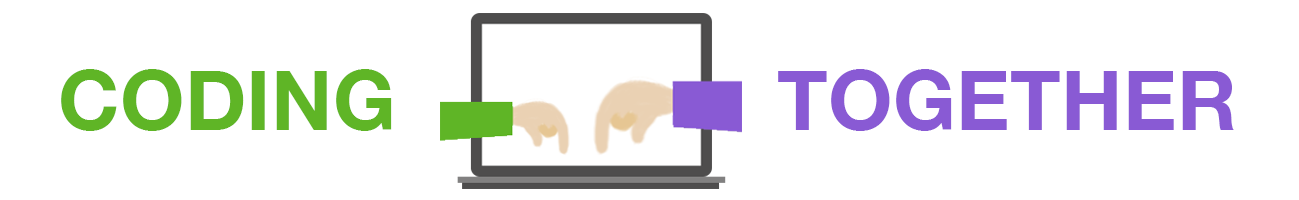
<style>
.page{position:relative;width:1299px;height:200px;background:#ffffff}
.page>*{position:absolute;margin:0}
.t1{font:83.3px "HelveticaNeue-Bold";color:#5fb526}
.t2{font:83.3px "HelveticaNeue-Bold";color:#895ad4}
</style>
<div class="page">
<p class="t1" style="left:61px;top:69px;width:331px;height:62px">CODING</p>
<p class="t2" style="left:778px;top:69px;width:456px;height:62px">TOGETHER</p>
</div>
